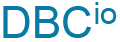
<style>
.page{position:relative;width:120px;height:42px;background:#ffffff}
.page>*{position:absolute;margin:0}
.t1{font:44px "ArialMT";color:#087aa3}
.t2{font:30.7px "ArialMT";color:#087aa3}
</style>
<div class="page">
<p class="t1" style="left:3px;top:6px;width:88px;height:32px">DBC</p>
<p class="t2" style="left:95px;top:2px;width:22px;height:22px">io</p>
</div>
